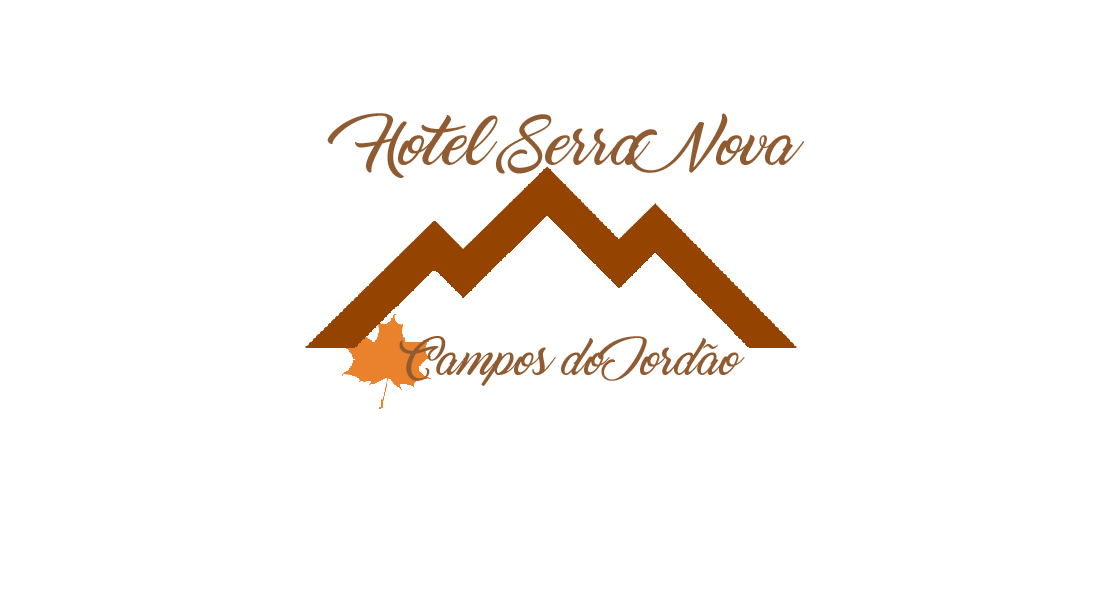
<style>
.page{position:relative;width:1110px;height:602px;background:#ffffff}
.page>*{position:absolute;margin:0}
.t1{font:50px "Marguerite";color:#905b30}
.t2{font:37.6px "Marguerite";color:#905b30}
</style>
<div class="page">
<p class="t1" style="left:327px;top:113px;width:478px;height:65px">Hotel Serra Nova</p>
<p class="t2" style="left:399px;top:336px;width:346px;height:50px">Campos do Jordão</p>
</div>
